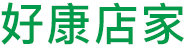
<style>
.page{position:relative;width:184px;height:47px;background:#ffffff}
.page>*{position:absolute;margin:0}
.t1{font:44.9px "PingFangHK-Medium";letter-spacing:0.05em;color:#009b4a}
</style>
<div class="page">
<p class="t1" style="left:1px;top:2px;width:183px;height:43px">好康店家</p>
</div>
